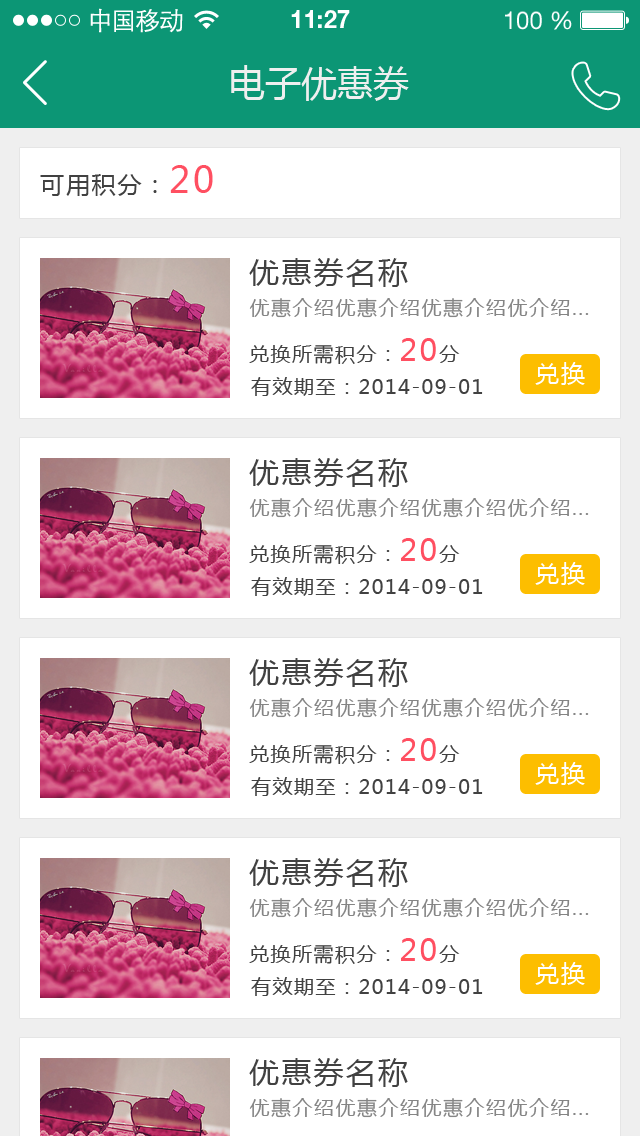
<style>
.page{position:relative;width:640px;height:1136px;background:#ffffff}
.page>*{position:absolute;margin:0}
.t1{font:25px "STXihei";letter-spacing:-0.045em;color:#fefefe}
.t2{font:24.6px "HelveticaNeueLTPro-Bd";color:#ffffff}
.t3{font:24.6px "HelveticaNeueLTStd-Roman";color:#ffffff}
.t4{font:36px "MicrosoftYaHei";color:#efefef}
.t5{font:24px "MicrosoftYaHei";letter-spacing:0.075em;color:#414141}
.t6{font:36px "MicrosoftYaHei";letter-spacing:0.075em;color:#ff4f61}
.t7{font:30px "MicrosoftYaHei";letter-spacing:0.075em;color:#414141}
.t8{font:20px "MicrosoftYaHei";letter-spacing:0.075em;color:#858585}
.t9{font:20px "MicrosoftYaHei";letter-spacing:0.075em;color:#414141}
.t10{font:30px "MicrosoftYaHei";letter-spacing:0.075em;color:#ff4f61}
.t11{font:24px "MicrosoftYaHei";letter-spacing:0.075em;color:#ffffff}
</style>
<div class="page">
<p class="t1" style="left:90px;top:8px;width:93px;height:25px">中国移动</p>
<p class="t2" style="left:291px;top:10px;width:59px;height:18px">11:27</p>
<p class="t3" style="left:505px;top:11px;width:67px;height:19px">100 %</p>
<p class="t4" style="left:231px;top:65px;width:178px;height:36px">电子优惠券</p>
<p class="t5" style="left:40px;top:165px;width:173px;height:31px">可用积分：<span class="t6">20</span></p>
<p class="t7" style="left:249px;top:258px;width:159px;height:29px">优惠券名称</p>
<p class="t8" style="left:249px;top:298px;width:340px;height:20px">优惠介绍优惠介绍优惠介绍优介绍...</p>
<p class="t9" style="left:249px;top:338px;width:211px;height:26px">兑换所需积分：<span class="t10">20</span>分</p>
<p class="t11" style="left:535px;top:362px;width:50px;height:23px">兑换</p>
<p class="t9" style="left:251px;top:377px;width:232px;height:19px">有效期至：2014-09-01</p>
<p class="t7" style="left:249px;top:458px;width:159px;height:29px">优惠券名称</p>
<p class="t8" style="left:249px;top:498px;width:340px;height:20px">优惠介绍优惠介绍优惠介绍优介绍...</p>
<p class="t9" style="left:249px;top:538px;width:211px;height:26px">兑换所需积分：<span class="t10">20</span>分</p>
<p class="t11" style="left:535px;top:562px;width:50px;height:23px">兑换</p>
<p class="t9" style="left:251px;top:577px;width:232px;height:19px">有效期至：2014-09-01</p>
<p class="t7" style="left:249px;top:658px;width:159px;height:29px">优惠券名称</p>
<p class="t8" style="left:249px;top:698px;width:340px;height:20px">优惠介绍优惠介绍优惠介绍优介绍...</p>
<p class="t9" style="left:249px;top:738px;width:211px;height:26px">兑换所需积分：<span class="t10">20</span>分</p>
<p class="t11" style="left:535px;top:762px;width:50px;height:23px">兑换</p>
<p class="t9" style="left:251px;top:777px;width:232px;height:19px">有效期至：2014-09-01</p>
<p class="t7" style="left:249px;top:858px;width:159px;height:29px">优惠券名称</p>
<p class="t8" style="left:249px;top:898px;width:340px;height:20px">优惠介绍优惠介绍优惠介绍优介绍...</p>
<p class="t9" style="left:249px;top:938px;width:211px;height:26px">兑换所需积分：<span class="t10">20</span>分</p>
<p class="t11" style="left:535px;top:962px;width:50px;height:23px">兑换</p>
<p class="t9" style="left:251px;top:977px;width:232px;height:19px">有效期至：2014-09-01</p>
<p class="t7" style="left:249px;top:1058px;width:159px;height:29px">优惠券名称</p>
<p class="t8" style="left:249px;top:1098px;width:340px;height:20px">优惠介绍优惠介绍优惠介绍优介绍...</p>
</div>
